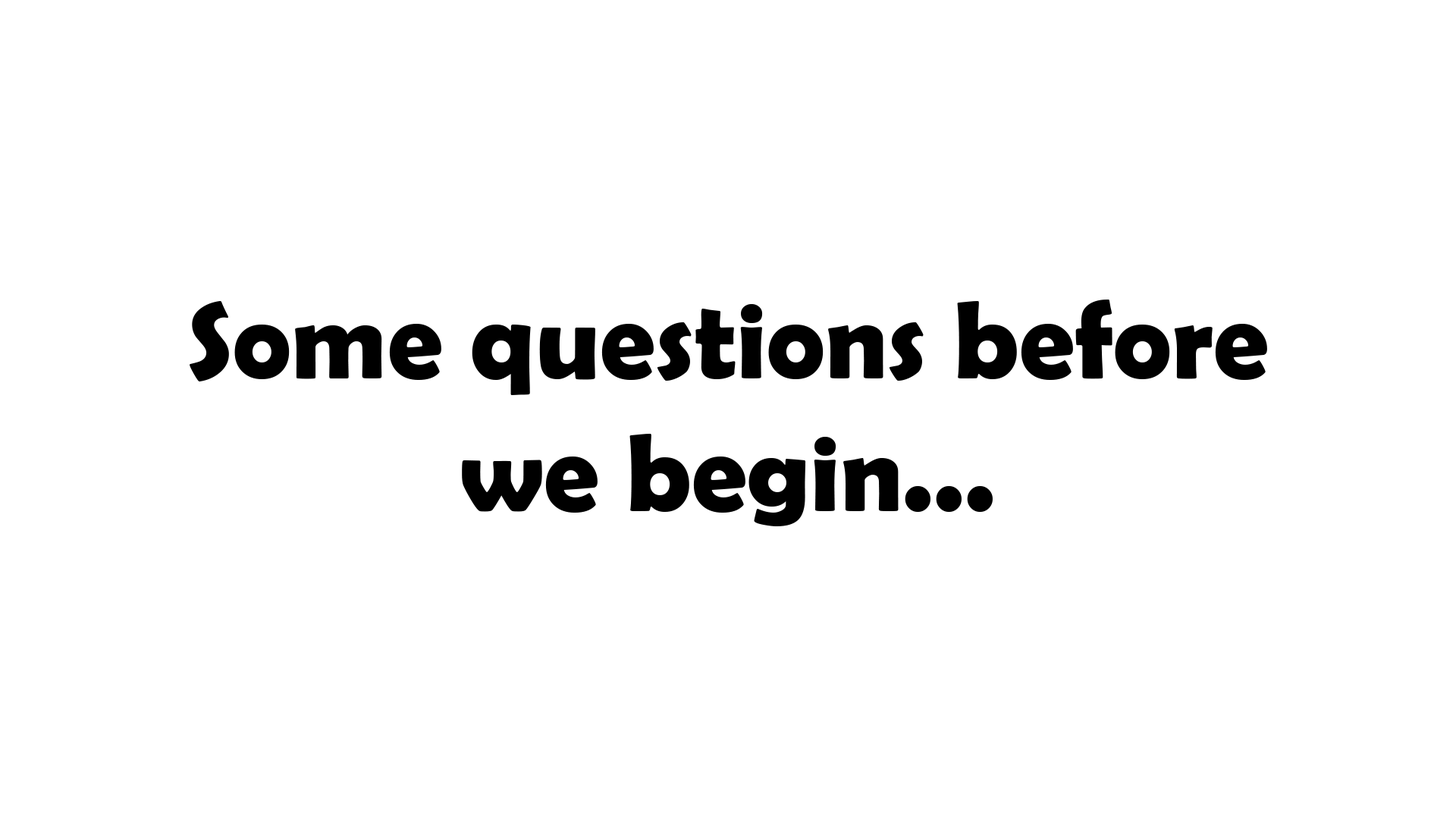
<style>
.page{position:relative;width:1456px;height:819px;background:#ffffff}
.page>*{position:absolute;margin:0}
.t1{font:110.3px "BerlinSansFBDemi-Bold";color:#000000}
</style>
<div class="page">
<p class="t1" style="left:190px;top:300px;width:1077px;height:226px;text-align:center">Some questions before<br>we begin...</p>
</div>
